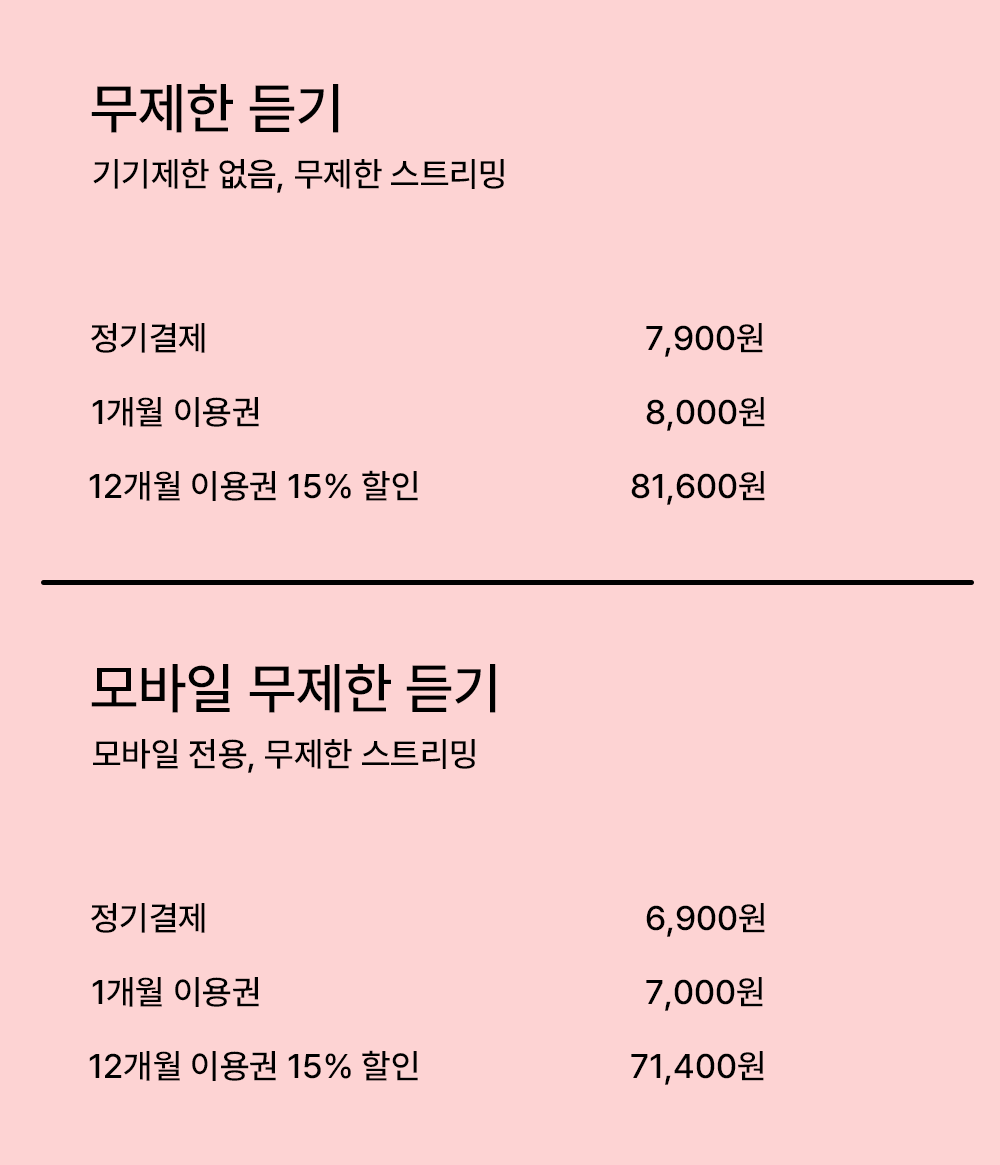
<style>
.page{position:relative;width:1000px;height:1165px;background:#fdd3d3}
.page>*{position:absolute;margin:0}
.t1{font:55.6px "Pretendard-Medium";color:#000000}
.t2{font:34px "Pretendard-Medium";color:#000000}
</style>
<div class="page">
<p class="t1" style="left:91px;top:84px;width:248px;height:49px">무제한 듣기</p>
<p class="t2" style="left:93px;top:159px;width:411px;height:34px">기기제한 없음, 무제한 스트리밍</p>
<p class="t2" style="left:91px;top:323px;width:114px;height:30px">정기결제</p>
<p class="t2" style="left:646px;top:323px;width:117px;height:34px">7,900원</p>
<p class="t2" style="left:92px;top:397px;width:167px;height:30px">1개월 이용권</p>
<p class="t2" style="left:646px;top:397px;width:119px;height:34px">8,000원</p>
<p class="t2" style="left:89px;top:470px;width:329px;height:31px">12개월 이용권 15% 할인</p>
<p class="t2" style="left:631px;top:471px;width:134px;height:34px">81,600원</p>
<p class="t1" style="left:91px;top:664px;width:405px;height:49px">모바일 무제한 듣기</p>
<p class="t2" style="left:93px;top:739px;width:382px;height:34px">모바일 전용, 무제한 스트리밍</p>
<p class="t2" style="left:91px;top:903px;width:114px;height:30px">정기결제</p>
<p class="t2" style="left:646px;top:903px;width:119px;height:34px">6,900원</p>
<p class="t2" style="left:92px;top:977px;width:167px;height:30px">1개월 이용권</p>
<p class="t2" style="left:646px;top:977px;width:117px;height:34px">7,000원</p>
<p class="t2" style="left:89px;top:1050px;width:329px;height:31px">12개월 이용권 15% 할인</p>
<p class="t2" style="left:631px;top:1051px;width:133px;height:34px">71,400원</p>
</div>
